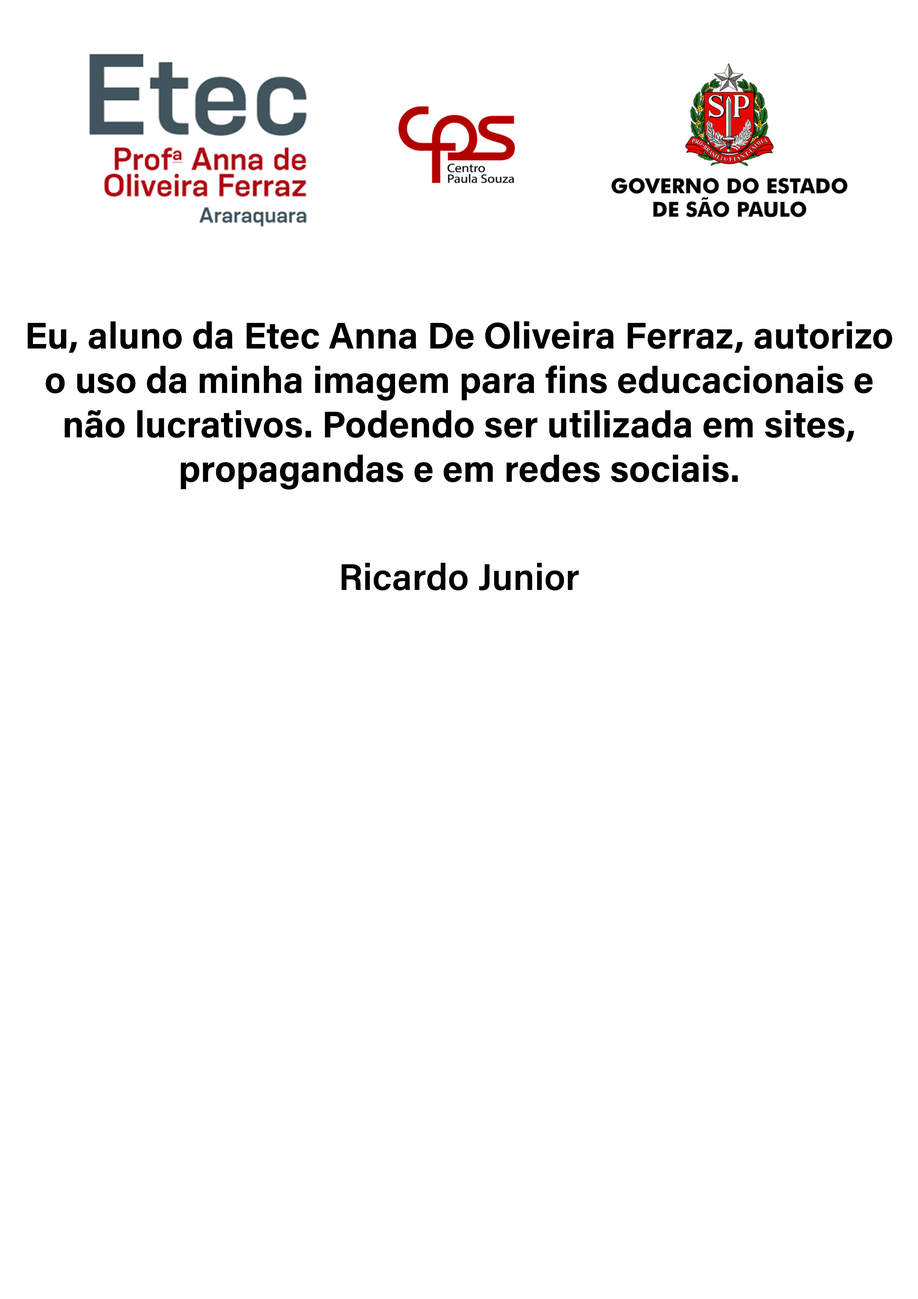
<style>
.page{position:relative;width:918px;height:1299px;background:#ffffff}
.page>*{position:absolute;margin:0}
.t1{font:37px "AcuminConcept_680.000wght";color:#000000}
.t2{font:37px "AcuminConcept-Semibold";color:#000000}
</style>
<div class="page">
<p class="t1" style="left:27px;top:321px;width:866px;height:168px;text-align:center">Eu, aluno da Etec Anna De Oliveira Ferraz, autorizo o uso da minha imagem para fins educacionais e não lucrativos. Podendo ser utilizada em sites, propagandas e em redes sociais.</p>
<p class="t2" style="left:342px;top:562px;width:237px;height:29px">Ricardo Junior</p>
</div>
